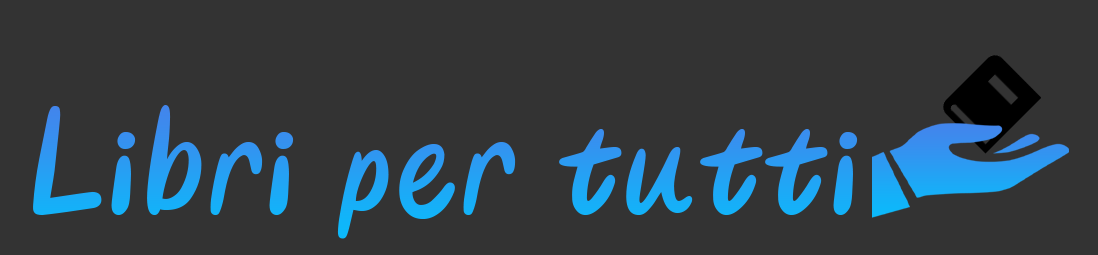
<style>
.page{position:relative;width:1098px;height:255px;background:#333333}
.page>*{position:absolute;margin:0}
.t1{font:155.5px "Conformable";color:#23a3f4}
</style>
<div class="page">
<p class="t1" style="left:33px;top:105px;width:825px;height:134px">Libri per tutti</p>
</div>
